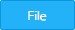
<style>
.page{position:relative;width:75px;height:30px;background:#23b1f7}
.page>*{position:absolute;margin:0}
.t1{font:12px "NanumBarunGothic";color:#ffffff}
</style>
<div class="page">
<p class="t1" style="left:28px;top:11px;width:19px;height:10px">File</p>
</div>
